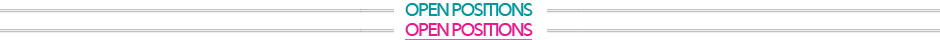
<style>
.page{position:relative;width:940px;height:40px;background:#ffffff}
.page>*{position:absolute;margin:0}
.t1{font:20px "MyriadWebPro";letter-spacing:-0.075em;color:#00979d}
.t2{font:20px "MyriadWebPro";letter-spacing:-0.075em;color:#ea198f;text-decoration:underline}
</style>
<div class="page">
<p class="t1" style="left:405px;top:3px;width:128px;height:13px">OPEN POSITIONS</p>
<p class="t2" style="left:405px;top:23px;width:128px;height:18px">OPEN POSITIONS</p>
</div>
